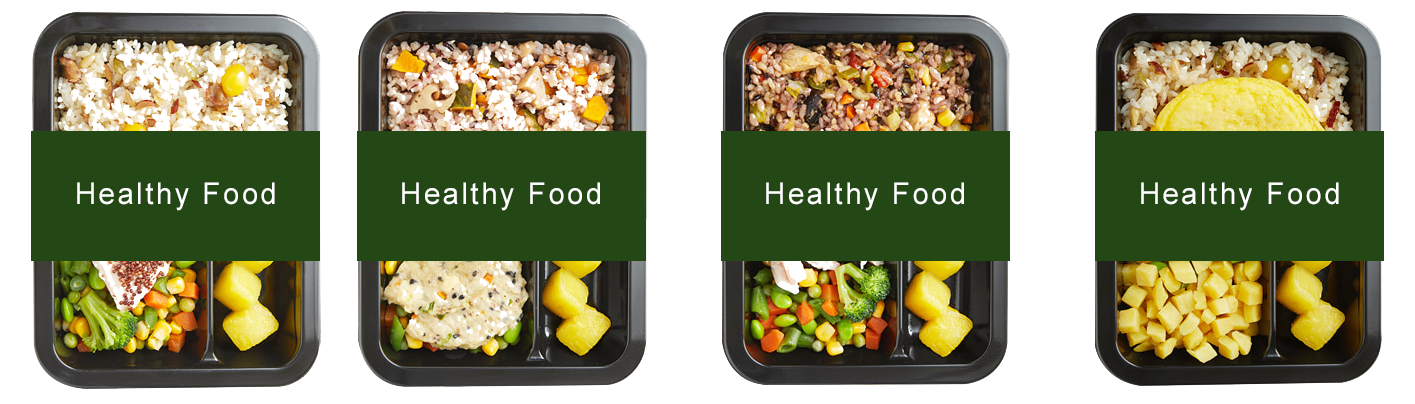
<style>
.page{position:relative;width:1415px;height:404px;background:#ffffff}
.page>*{position:absolute;margin:0}
.t1{font:30px "ArialMT";letter-spacing:0.09em;color:#ffffff;scale:0.97 1}
</style>
<div class="page">
<p class="t1" style="left:77px;top:182px;width:198px;height:29px">Healthy Food</p>
<p class="t1" style="left:402px;top:182px;width:198px;height:29px">Healthy Food</p>
<p class="t1" style="left:766px;top:182px;width:198px;height:29px">Healthy Food</p>
<p class="t1" style="left:1141px;top:182px;width:198px;height:29px">Healthy Food</p>
</div>
